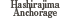
<style>
.page{position:relative;width:70px;height:18px;background:#ffffff}
.page>*{position:absolute;margin:0}
.t1{font:10px/8px "RyuminPro-ExBold";letter-spacing:-0.04em;color:#4c4843;scale:0.9 1}
</style>
<div class="page">
<p class="t1" style="left:10px;top:0px;width:50px;height:18px;text-align:center">Hashirajima<br>Anchorage</p>
</div>
